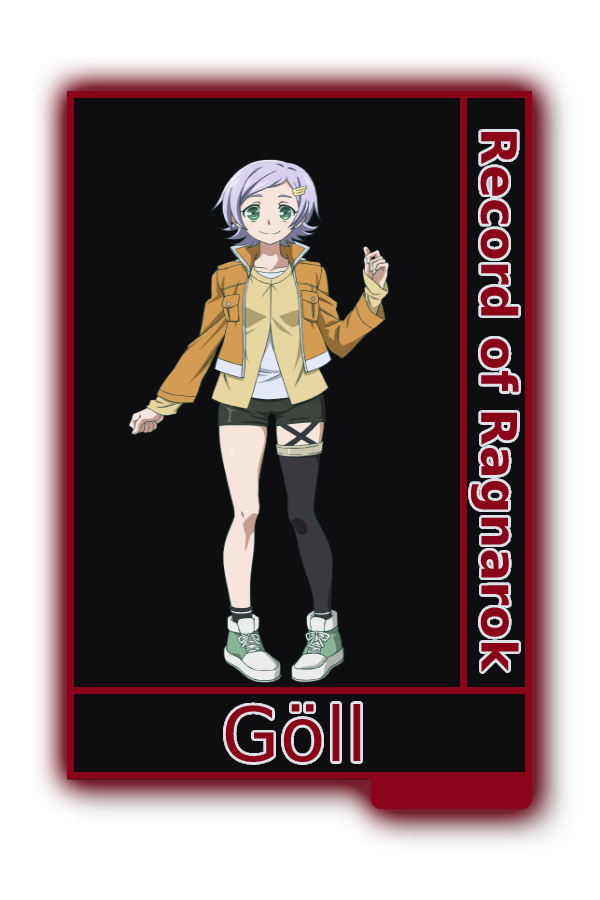
<style>
.page{position:relative;width:600px;height:900px;background:#0e0e10}
.page>*{position:absolute;margin:0}
.t1{font:48.8px "MADETOMMY-Bold";color:#8a051a}
.t2{font:75px "CoolveticaRg-Regular";color:#8a051a}
</style>
<div class="page">
<p class="t1" style="left:470px;top:131px;width:49px;height:542px;rotate:90deg">Record of Ragnarok</p>
<p class="t2" style="left:225px;top:704px;width:136px;height:59px">Göll</p>
</div>
